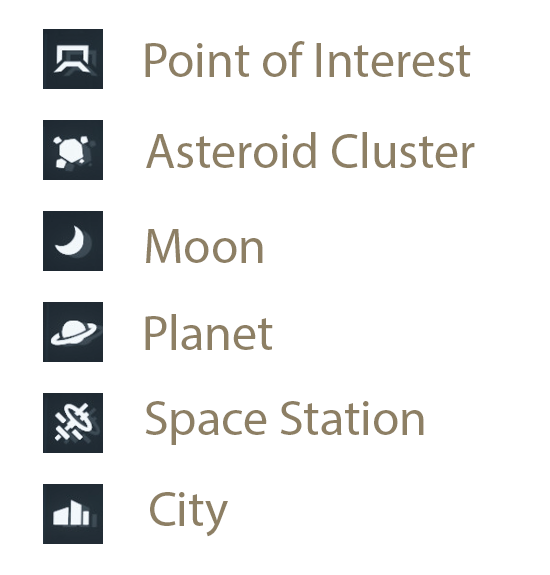
<style>
.page{position:relative;width:550px;height:575px;background:#ffffff}
.page>*{position:absolute;margin:0}
.t1{font:50px "MyriadPro-Regular";color:#8d7f64}
</style>
<div class="page">
<p class="t1" style="left:145px;top:41px;width:326px;height:36px">Point of Interest</p>
<p class="t1" style="left:146px;top:132px;width:329px;height:36px">Asteroid Cluster</p>
<p class="t1" style="left:146px;top:229px;width:117px;height:34px">Moon</p>
<p class="t1" style="left:145px;top:314px;width:128px;height:36px">Planet</p>
<p class="t1" style="left:145px;top:401px;width:279px;height:44px">Space Station</p>
<p class="t1" style="left:150px;top:492px;width:78px;height:45px">City</p>
</div>
